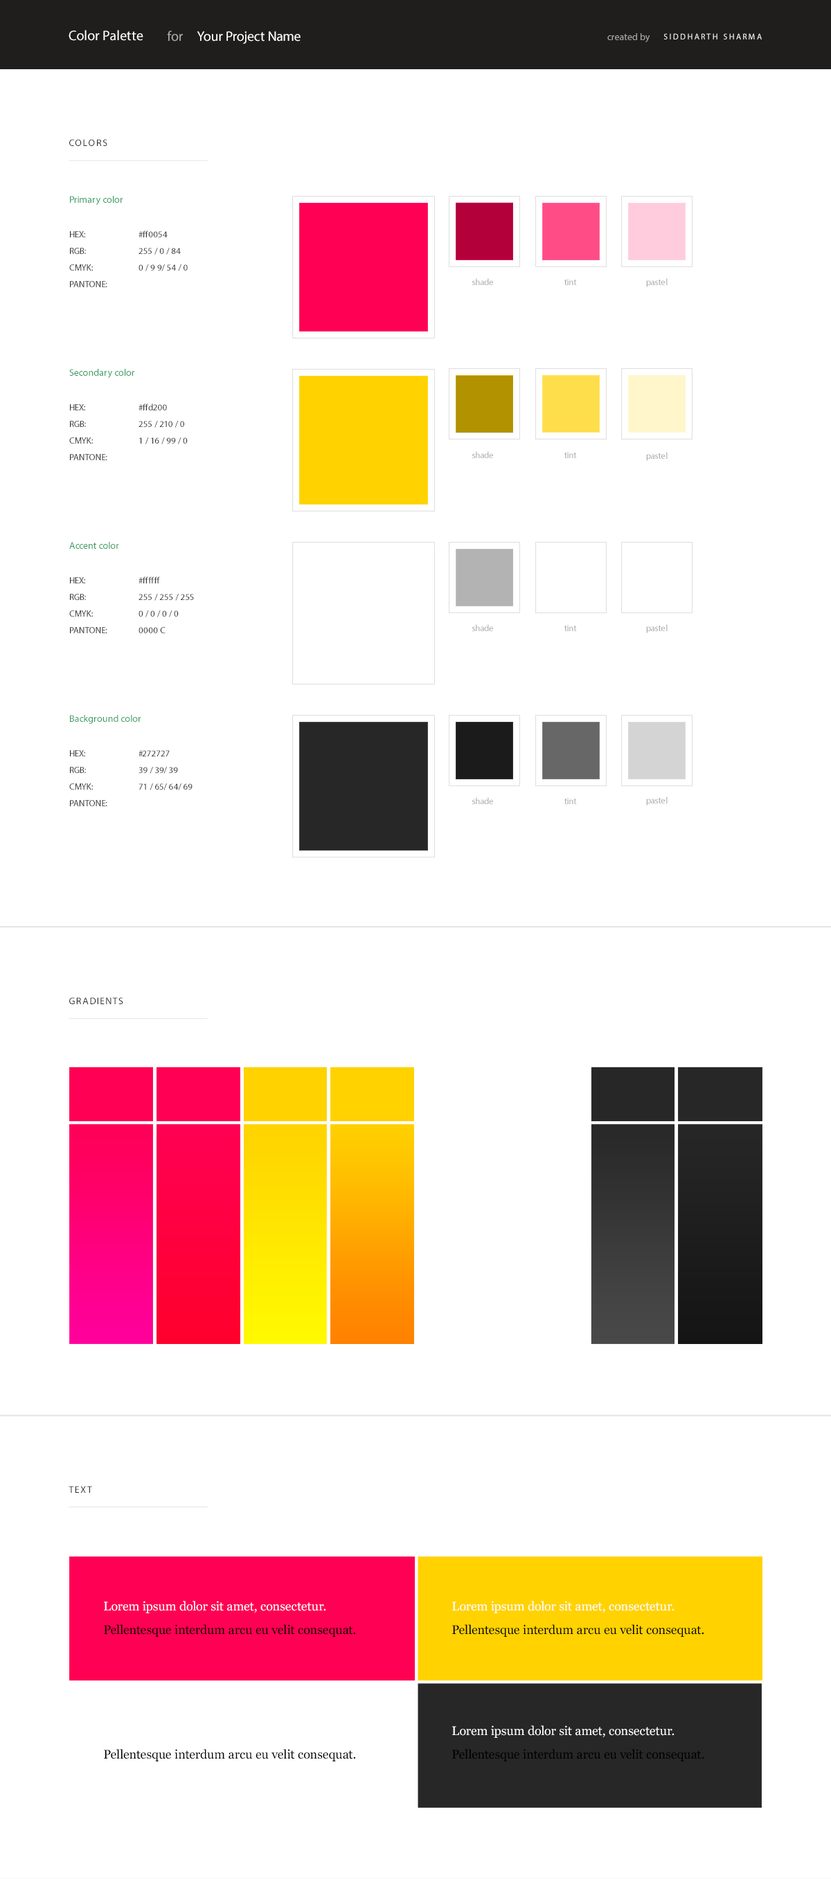
<style>
.page{position:relative;width:831px;height:1879px;background:#ffffff}
.page>*{position:absolute;margin:0}
.t1{font:13.8px "MyriadPro-Regular";color:#ffffff}
.t2{font:13.8px "MyriadPro-Regular";color:#a9a9a8}
.t3{font:9.7px "MyriadPro-Regular";color:#a9a9a8}
.t4{font:8.3px "MyriadPro-Regular";letter-spacing:0.2em;color:#ffffff;text-transform:uppercase}
.t5{font:9.7px "MyriadPro-Regular";letter-spacing:0.1em;color:#333333;text-transform:uppercase}
.t6{font:9.7px "MyriadPro-Regular";color:#3a9c61}
.t7{font:9px/13.8px "MyriadPro-Regular";color:#333333}
.t8{font:9px "MyriadPro-Regular";color:#adadad}
.t9{font:12.5px/20.8px "Georgia";color:#000000}
.t10{font:12.5px/20.8px "Georgia";color:#ffffff}
</style>
<div class="page">
<p class="t1" style="left:69px;top:30px;width:74px;height:11px">Color Palette</p>
<p class="t2" style="left:167px;top:30px;width:16px;height:12px">for</p>
<p class="t1" style="left:197px;top:31px;width:103px;height:13px">Your Project Name</p>
<p class="t3" style="left:607px;top:33px;width:43px;height:9px">created by</p>
<p class="t4" style="left:663px;top:33px;width:98px;height:6px">SIDDHARTH SHARMA</p>
<p class="t5" style="left:69px;top:139px;width:38px;height:7px">colors</p>
<p class="t6" style="left:70px;top:196px;width:53px;height:9px">Primary color</p>
<p class="t7" style="left:69px;top:231px;width:38px;height:56px">HEX:<br>RGB:<br>CMYK:<br>PANTONE:</p>
<p class="t7" style="left:138px;top:231px;width:50px;height:40px">#ff0054<br>255 / 0 / 84<br>0 / 9 9/ 54 / 0</p>
<p class="t8" style="left:471px;top:278px;width:22px;height:7px">shade</p>
<p class="t8" style="left:564px;top:279px;width:13px;height:6px">tint</p>
<p class="t8" style="left:646px;top:278px;width:21px;height:9px">pastel</p>
<p class="t6" style="left:69px;top:369px;width:65px;height:9px">Secondary color</p>
<p class="t7" style="left:69px;top:404px;width:38px;height:56px">HEX:<br>RGB:<br>CMYK:<br>PANTONE:</p>
<p class="t7" style="left:138px;top:404px;width:50px;height:40px">#ffd200<br>255 / 210 / 0<br>1 / 16 / 99 / 0</p>
<p class="t8" style="left:471px;top:451px;width:22px;height:7px">shade</p>
<p class="t8" style="left:564px;top:452px;width:13px;height:6px">tint</p>
<p class="t8" style="left:646px;top:452px;width:21px;height:9px">pastel</p>
<p class="t6" style="left:69px;top:542px;width:50px;height:7px">Accent color</p>
<p class="t7" style="left:69px;top:577px;width:38px;height:56px">HEX:<br>RGB:<br>CMYK:<br>PANTONE:</p>
<p class="t7" style="left:138px;top:577px;width:56px;height:56px">#ffffff<br>255 / 255 / 255<br>0 / 0 / 0 / 0<br>0000 C</p>
<p class="t8" style="left:471px;top:624px;width:22px;height:7px">shade</p>
<p class="t8" style="left:564px;top:625px;width:13px;height:6px">tint</p>
<p class="t8" style="left:646px;top:624px;width:21px;height:9px">pastel</p>
<p class="t6" style="left:70px;top:715px;width:71px;height:9px">Background color</p>
<p class="t7" style="left:69px;top:750px;width:38px;height:56px">HEX:<br>RGB:<br>CMYK:<br>PANTONE:</p>
<p class="t7" style="left:138px;top:750px;width:54px;height:40px">#272727<br>39 / 39/ 39<br>71 / 65/ 64/ 69</p>
<p class="t8" style="left:471px;top:797px;width:22px;height:7px">shade</p>
<p class="t8" style="left:646px;top:797px;width:21px;height:9px">pastel</p>
<p class="t8" style="left:564px;top:798px;width:13px;height:6px">tint</p>
<p class="t5" style="left:69px;top:997px;width:54px;height:7px">Gradients</p>
<p class="t5" style="left:69px;top:1486px;width:23px;height:7px">Text</p>
<p class="t9" style="left:104px;top:1601px;width:252px;height:36px"><span class="t10">Lorem ipsum dolor sit amet, consectetur.<br></span>Pellentesque interdum arcu eu velit consequat.</p>
<p class="t9" style="left:452px;top:1601px;width:252px;height:36px"><span class="t10">Lorem ipsum dolor sit amet, consectetur.<br></span>Pellentesque interdum arcu eu velit consequat.</p>
<p class="t9" style="left:104px;top:1726px;width:252px;height:36px"><span class="t10">Lorem ipsum dolor sit amet, consectetur.<br></span>Pellentesque interdum arcu eu velit consequat.</p>
<p class="t9" style="left:452px;top:1726px;width:252px;height:36px"><span class="t10">Lorem ipsum dolor sit amet, consectetur.<br></span>Pellentesque interdum arcu eu velit consequat.</p>
</div>
